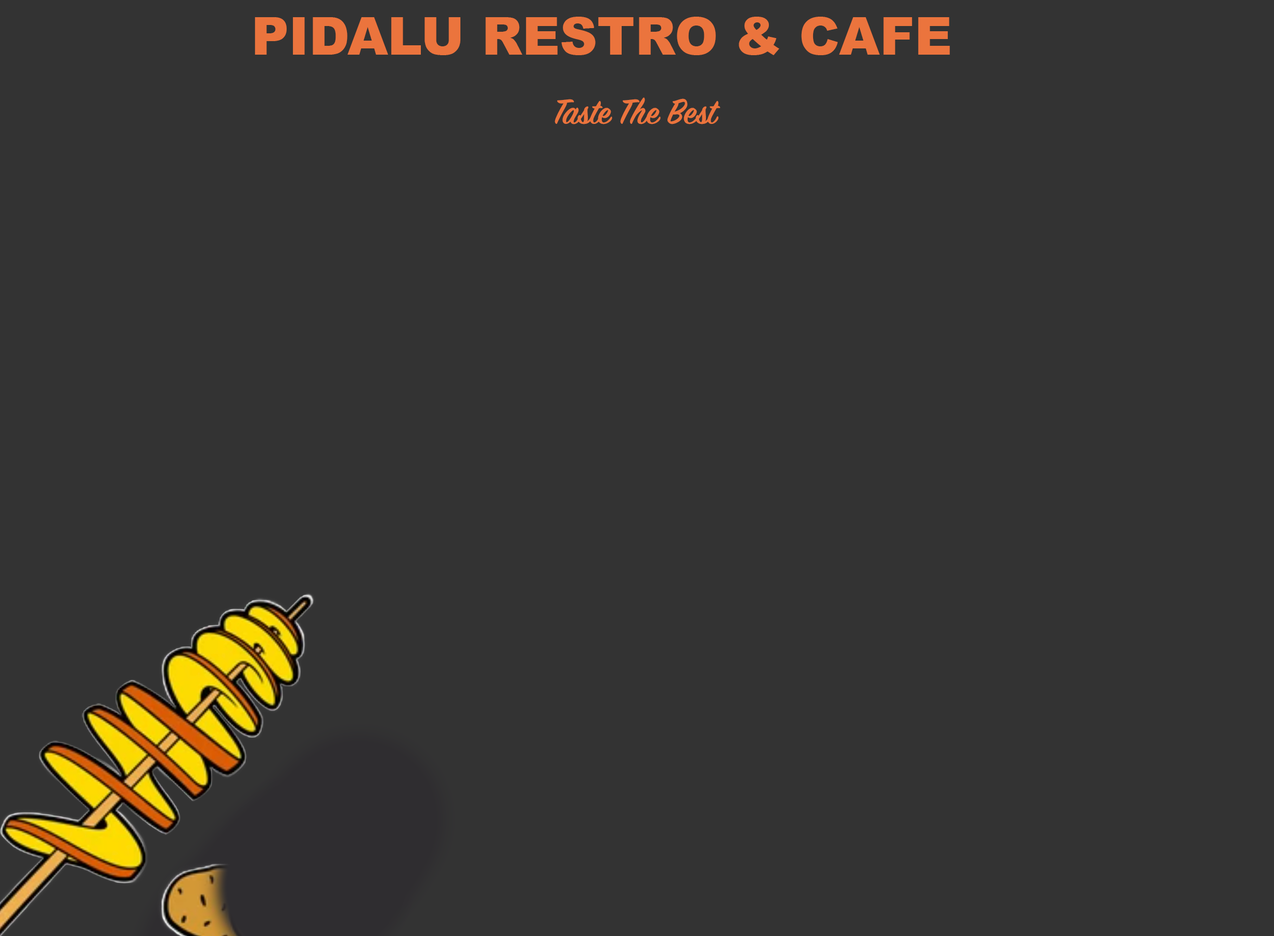
<style>
.page{position:relative;width:1274px;height:936px;background:#333333}
.page>*{position:absolute;margin:0}
.t1{font:52px "Arial-Black";color:#eb743d}
.t2{font:39px "SignPainter-HouseScriptSemibold";color:#eb743d}
</style>
<div class="page">
<p class="t1" style="left:255px;top:17px;width:695px;height:38px">PIDALU RESTRO &amp; CAFE</p>
<p class="t2" style="left:555px;top:97px;width:166px;height:27px">Taste The Best</p>
</div>
